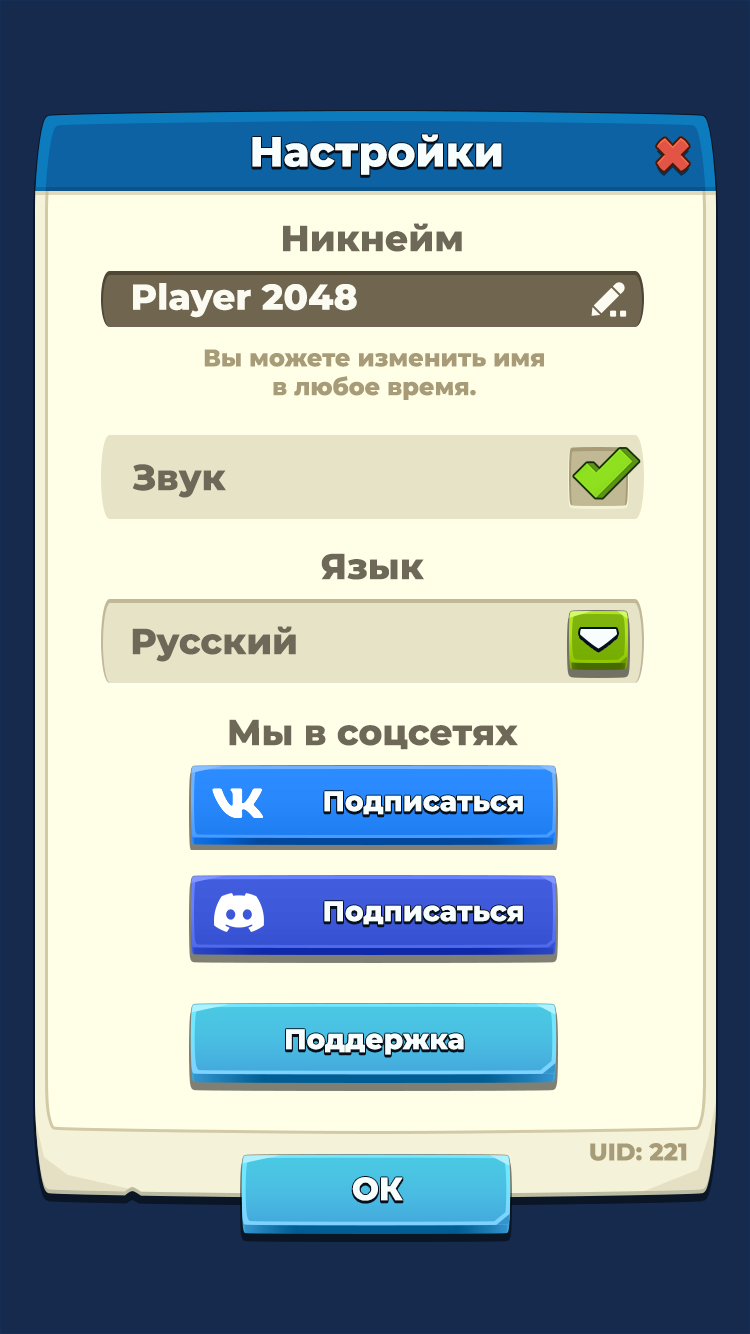
<style>
.page{position:relative;width:750px;height:1334px;background:#ffffe7}
.page>*{position:absolute;margin:0}
.t1{font:42px "Montserrat-ExtraBold";color:#f9fafa}
.t2{font:36px "Montserrat-ExtraBold";color:#6e6858}
.t3{font:36px "Montserrat-ExtraBold";color:#f9fafa}
.t4{font:24px "Montserrat-ExtraBold";color:#a79c77}
.t5{font:28px "Montserrat-ExtraBold";color:#f9fafa}
.t6{font:32px "Montserrat-ExtraBold";color:#f9fafa;text-transform:uppercase}
</style>
<div class="page">
<p class="t1" style="left:252px;top:134px;width:250px;height:41px">Настройки</p>
<p class="t2" style="left:283px;top:223px;width:179px;height:29px">Никнейм</p>
<p class="t3" style="left:133px;top:283px;width:224px;height:35px">Player 2048</p>
<p class="t4" style="left:204px;top:349px;width:340px;height:51px;text-align:center">Вы можете изменить имя<br>в любое время.</p>
<p class="t2" style="left:132px;top:464px;width:94px;height:34px">Звук</p>
<p class="t2" style="left:321px;top:553px;width:103px;height:27px">Язык</p>
<p class="t2" style="left:132px;top:626px;width:164px;height:36px">Русский</p>
<p class="t2" style="left:229px;top:719px;width:289px;height:31px">Мы в соцсетях</p>
<p class="t5" style="left:324px;top:791px;width:199px;height:24px">Подписаться</p>
<p class="t5" style="left:324px;top:901px;width:199px;height:24px">Подписаться</p>
<p class="t5" style="left:286px;top:1029px;width:178px;height:26px">Поддержка</p>
<p class="t4" style="left:590px;top:1143px;width:97px;height:18px">UID: 221</p>
<p class="t6" style="left:352px;top:1177px;width:51px;height:24px">ок</p>
</div>
